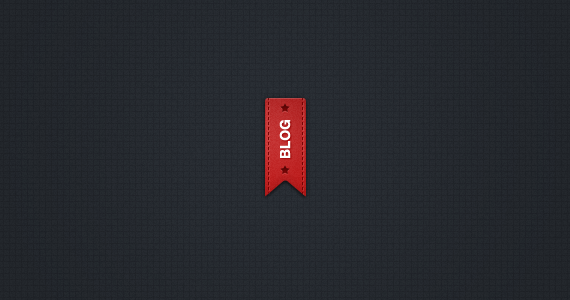
<style>
.page{position:relative;width:570px;height:300px}
.page>*{position:absolute;margin:0}
.t1{font:14px "HelveticaNeue-Bold";color:#ffffff;text-transform:uppercase}
</style>
<div class="page">
<p class="t1" style="left:279px;top:120px;width:12px;height:38px;rotate:-90deg">Blog</p>
</div>
